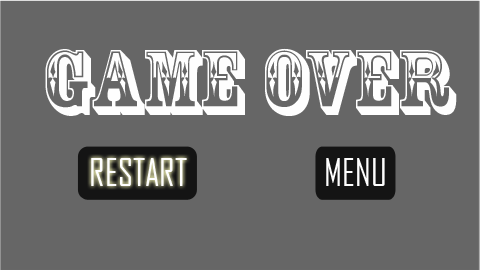
<style>
.page{position:relative;width:480px;height:270px;background:#666666}
.page>*{position:absolute;margin:0}
.t1{font:86px "RosewoodStd-Regular";color:#fefefe}
.t2{font:36px "AgencyFB-Reg";color:#fefefe}
</style>
<div class="page">
<p class="t1" style="left:45px;top:48px;width:412px;height:68px">Game over</p>
<p class="t2" style="left:91px;top:158px;width:96px;height:28px">RESTART</p>
<p class="t2" style="left:326px;top:158px;width:59px;height:28px">MENU</p>
</div>
